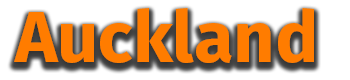
<style>
.page{position:relative;width:350px;height:80px;background:#ffffff}
.page>*{position:absolute;margin:0}
.t1{font:72px "FiraSans-Bold";color:#ff7c00}
</style>
<div class="page">
<p class="t1" style="left:14px;top:8px;width:300px;height:55px">Auckland</p>
</div>
